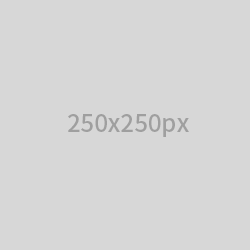
<style>
.page{position:relative;width:250px;height:250px;background:#d7d7d7}
.page>*{position:absolute;margin:0}
.t1{font:24px "SourceHanSansCN-Medium";color:#a0a0a0}
</style>
<div class="page">
<p class="t1" style="left:68px;top:114px;width:121px;height:23px">250x250px</p>
</div>
